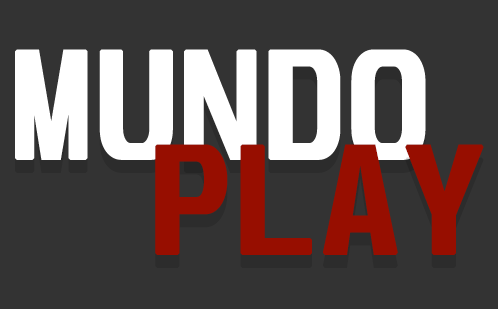
<style>
.page{position:relative;width:498px;height:309px;background:#333333}
.page>*{position:absolute;margin:0}
.t1{font:132px "Unispace-Bold";color:#ffffff;text-transform:uppercase;font-weight:bold}
.t2{font:132px "Unispace-Bold";color:#970e00;text-transform:uppercase;font-weight:bold}
</style>
<div class="page">
<p class="t1" style="left:15px;top:49px;width:411px;height:111px">mundo</p>
<p class="t2" style="left:155px;top:144px;width:329px;height:111px">play</p>
</div>
